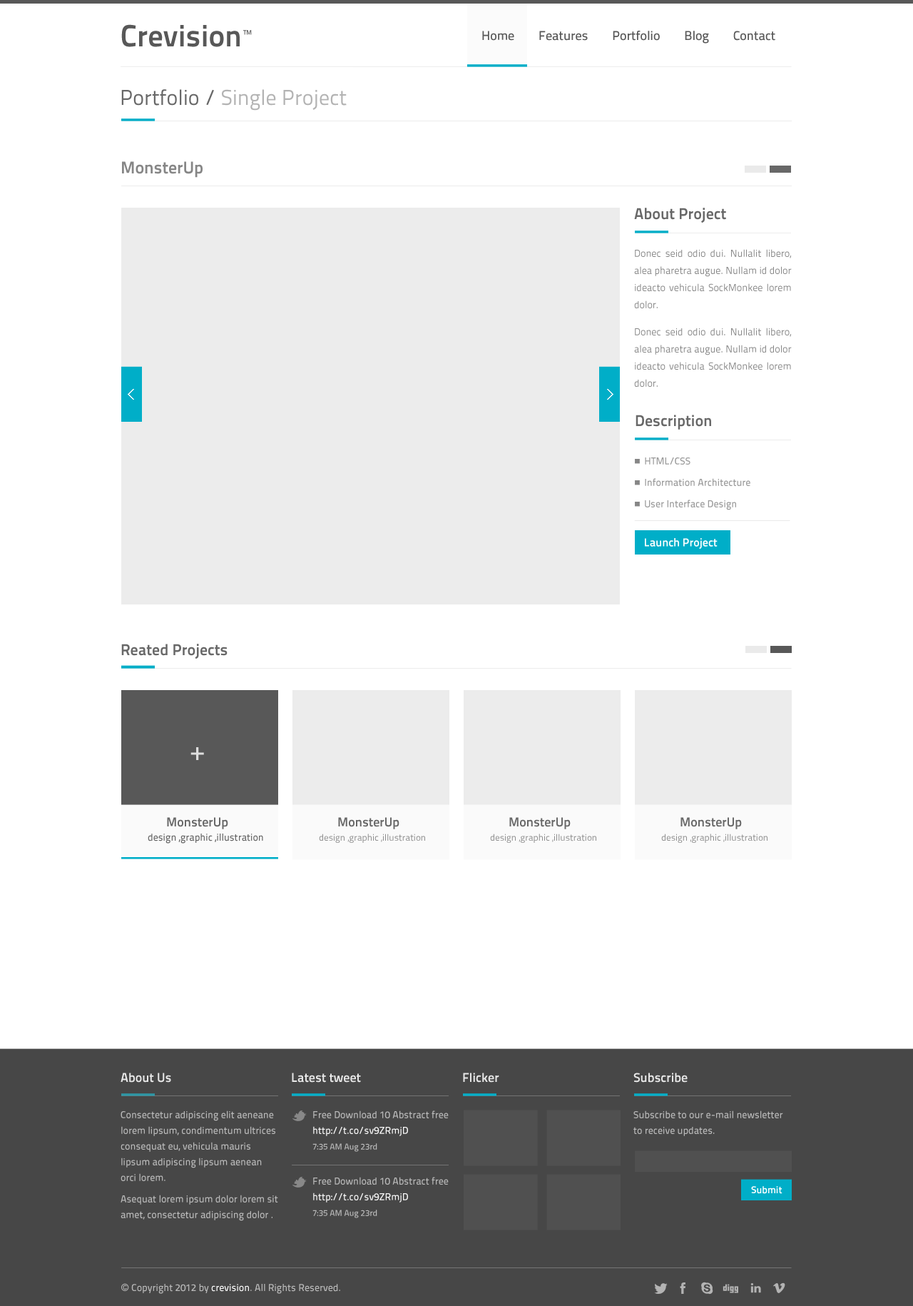
<style>
.page{position:relative;width:913px;height:1306px;background:#ffffff}
.page>*{position:absolute;margin:0}
.t1{font:12.8px "TitilliumText22L-Medium";color:#585858}
.t2{font:21.4px "TitilliumText22L-Regular";color:#b3b3b3}
.t3{font:21.4px "TitilliumText22L-Regular";color:#686868}
.t4{font:17.1px "TitilliumText22L-Bold";color:#868686}
.t5{font:15.7px "TitilliumText22L-Bold";color:#686868}
.t6{font:10px/17.1px "TitilliumText22L-Regular";color:#868686}
.t7{font:10px/21.4px "TitilliumText22L-Medium";color:#999999}
.t8{font:11.4px "TitilliumText22L-Bold";color:#ffffff}
.t9{font:25.7px "TitilliumText22L-Medium";color:#dedede}
.t10{font:12.8px "TitilliumText22L-Bold";color:#686868}
.t11{font:10px "TitilliumText22L-Medium";color:#686868}
.t12{font:9.3px "TitilliumText22L-Regular";color:#8c8c8c}
.t13{font:12.8px "TitilliumText22L-Bold";color:#e8e8e8}
.t14{font:10px/15.7px "TitilliumText22L-Medium";color:#b9b9b9}
.t15{font:10px/15.7px "TitilliumText22L-Medium";color:#fafafa}
.t16{font:8.6px/15.7px "TitilliumText22L-Medium";color:#b9b9b9}
.t17{font:10px "TitilliumText22L-Bold";color:#ffffff}
.t18{font:10px "TitilliumText22L-Medium";color:#b9b9b9}
.t19{font:10px "ArialMT";color:#b9b9b9}
.t20{font:10px "TitilliumText22L-Medium";color:#fafafa}
</style>
<div class="page">
<p class="t1" style="left:482px;top:31px;width:294px;height:13px">Home        Features        Portfolio        Blog        Contact</p>
<p class="t2" style="left:121px;top:89px;width:226px;height:22px"><span class="t3">Portfolio /</span> Single Project</p>
<p class="t4" style="left:122px;top:161px;width:81px;height:17px">MonsterUp</p>
<p class="t5" style="left:634px;top:208px;width:92px;height:15px">About Project</p>
<p class="t6" style="left:634px;top:249px;width:158px;height:138px;text-align:justify">Donec seid odio dui. Nullalit libero, alea pharetra augue. Nullam id dolor ideacto vehicula SockMonkee lorem dolor.<br><br>Donec seid odio dui. Nullalit libero, alea pharetra augue. Nullam id dolor ideacto vehicula SockMonkee lorem dolor.</p>
<p class="t5" style="left:636px;top:415px;width:75px;height:15px">Description</p>
<p class="t7" style="left:645px;top:457px;width:106px;height:53px;text-align:justify">HTML/CSS<br>    Information Architecture<br>    User Interface Design</p>
<p class="t8" style="left:645px;top:538px;width:73px;height:11px">Launch Project</p>
<p class="t5" style="left:121px;top:644px;width:107px;height:15px">Reated Projects</p>
<p class="t9" style="left:191px;top:747px;width:13px;height:13px">+</p>
<p class="t10" style="left:167px;top:817px;width:61px;height:12px">MonsterUp</p>
<p class="t10" style="left:338px;top:817px;width:62px;height:12px">MonsterUp</p>
<p class="t10" style="left:509px;top:817px;width:62px;height:12px">MonsterUp</p>
<p class="t10" style="left:681px;top:817px;width:61px;height:12px">MonsterUp</p>
<p class="t11" style="left:148px;top:833px;width:115px;height:10px">design ,graphic ,illustration</p>
<p class="t12" style="left:319px;top:833px;width:106px;height:10px">design ,graphic ,illustration</p>
<p class="t12" style="left:490px;top:833px;width:106px;height:10px">design ,graphic ,illustration</p>
<p class="t12" style="left:661px;top:833px;width:107px;height:10px">design ,graphic ,illustration</p>
<p class="t13" style="left:121px;top:1072px;width:50px;height:10px">About Us</p>
<p class="t13" style="left:292px;top:1072px;width:69px;height:10px">Latest tweet</p>
<p class="t13" style="left:463px;top:1072px;width:36px;height:10px">Flicker</p>
<p class="t13" style="left:634px;top:1072px;width:54px;height:10px">Subscribe</p>
<p class="t14" style="left:121px;top:1110px;width:157px;height:111px">Consectetur adipiscing elit aeneane lorem lipsum, condimentum ultrices consequat eu, vehicula mauris lipsum adipiscing lipsum aenean orci lorem.<br><br>Asequat lorem ipsum dolor lorem sit amet, consectetur adipiscing dolor .</p>
<p class="t14" style="left:313px;top:1110px;width:136px;height:42px">Free Download 10 Abstract free<br><span class="t15">http://t.co/sv9ZRmjD <br></span><span class="t16">7:35 AM Aug 23rd</span></p>
<p class="t14" style="left:634px;top:1110px;width:149px;height:26px">Subscribe to our e-mail newsletter to receive updates.</p>
<p class="t14" style="left:313px;top:1177px;width:136px;height:41px">Free Download 10 Abstract free<br><span class="t15">http://t.co/sv9ZRmjD <br></span><span class="t16">7:35 AM Aug 23rd</span></p>
<p class="t17" style="left:751px;top:1186px;width:32px;height:8px">Submit</p>
<p class="t18" style="left:121px;top:1283px;width:219px;height:11px"><span class="t19">© </span>Copyright 2012 by <span class="t20">crevision</span>. All Rights Reserved.</p>
</div>
